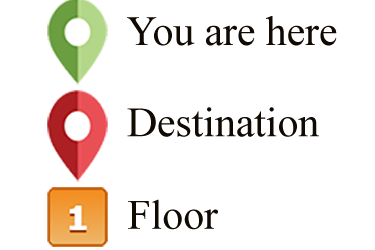
<style>
.page{position:relative;width:375px;height:250px;background:#ffffff}
.page>*{position:absolute;margin:0}
.t1{font:41.7px "TimesNewRomanPSMT";color:#110a02}
</style>
<div class="page">
<p class="t1" style="left:127px;top:16px;width:210px;height:30px">You are here</p>
<p class="t1" style="left:127px;top:107px;width:192px;height:30px">Destination</p>
<p class="t1" style="left:128px;top:199px;width:90px;height:31px">Floor</p>
</div>
